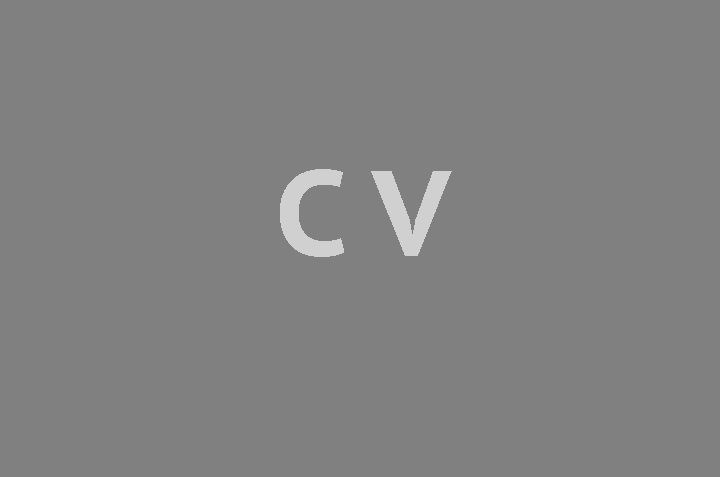
<style>
.page{position:relative;width:720px;height:477px;background:#808080}
.page>*{position:absolute;margin:0}
.t1{font:120px "PTSans-CaptionBold";color:#d0d0d0}
</style>
<div class="page">
<p class="t1" style="left:280px;top:169px;width:172px;height:88px">C V</p>
</div>
